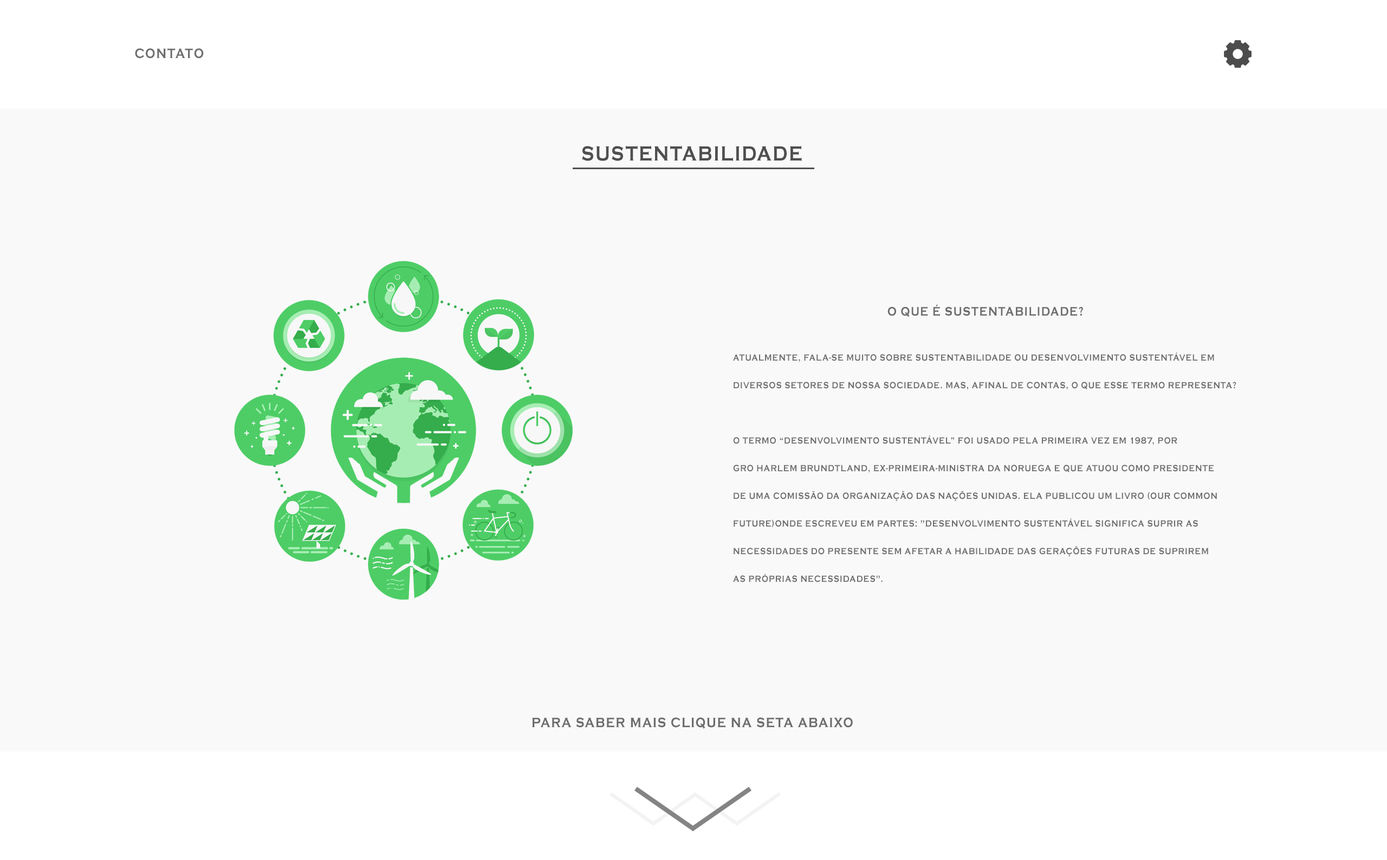
<style>
.page{position:relative;width:1387px;height:860px;background:#f9f9f9}
.page>*{position:absolute;margin:0}
.t1{font:14.1px "CopperplateGothic-Bold";letter-spacing:0.075em;color:#6e6e6e;text-transform:uppercase;scale:0.84 1}
.t2{font:12.7px "CopperplateGothic-Bold";letter-spacing:0.075em;color:#6c6c6c;text-transform:uppercase;scale:0.84 1}
.t3{font:9.1px/27.7px "CopperplateGothic-Bold";letter-spacing:0.075em;color:#6c6c6c;text-transform:uppercase;scale:0.84 1}
.t4{font:14.1px "CopperplateGothic-Bold";letter-spacing:0.075em;color:#6c6c6c;text-transform:uppercase;scale:0.84 1}
</style>
<div class="page">
<p class="t1" style="left:135px;top:48px;width:69px;height:11px">Contato</p>
<p class="t2" style="left:888px;top:304px;width:195px;height:13px">O que é sustentabilidade?</p>
<p class="t3" style="left:733px;top:352px;width:504px;height:230px">Atualmente, fala-se muito sobre sustentabilidade ou desenvolvimento sustentável em<br>diversos setores de nossa sociedade. Mas, afinal de contas, o que esse termo representa?<br><br>O termo “desenvolvimento sustentável” foi usado pela primeira vez em 1987, por<br>Gro Harlem Brundtland, ex-primeira-ministra da Noruega e que atuou como presidente<br>de uma comissão da Organização das Nações Unidas. Ela publicou um livro (Our Common<br>Future)onde escreveu em partes: "Desenvolvimento sustentável significa suprir as<br>necessidades do presente sem afetar a habilidade das gerações futuras de suprirem<br>as próprias necessidades".</p>
<p class="t4" style="left:532px;top:717px;width:321px;height:12px">Para saber mais clique na seta abaixo</p>
</div>
